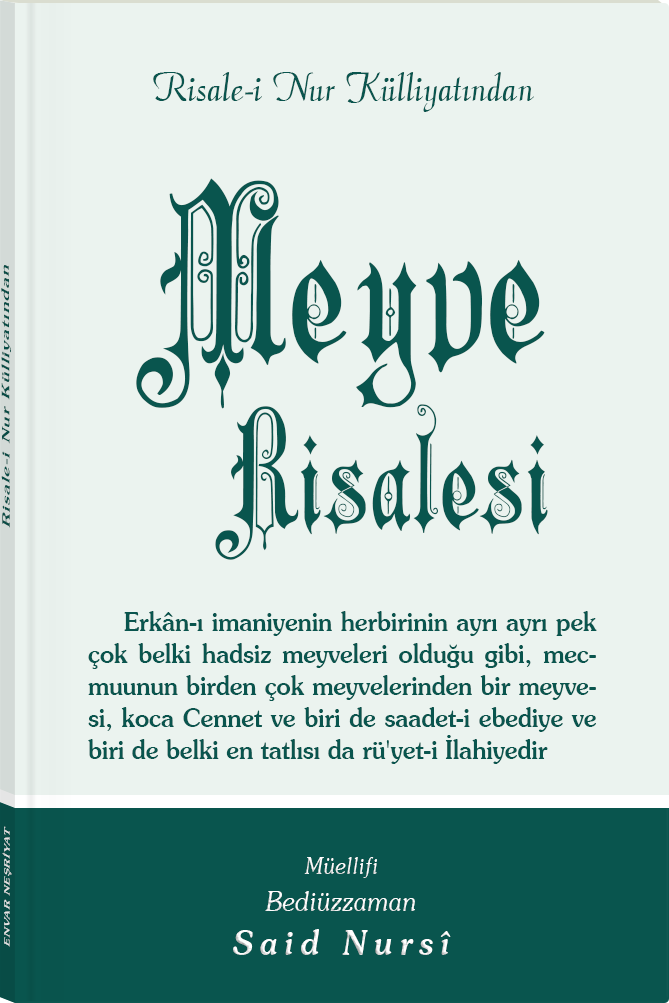
<style>
.page{position:relative;width:669px;height:1003px;background:#ebf3ef}
.page>*{position:absolute;margin:0}
.t1{font:45.3px "Barla © 072 Aria ScriptScriptSSi";color:#09554e;scale:0.94 1}
.t2{font:157.8px/168.4px "Barla © 001 Liva Nur";letter-spacing:-0.001em;color:#09554e;scale:0.93 1}
.t3{font:235px/209.6px "Barla © 001 Liva Nur";letter-spacing:-0.001em;color:#09554e;scale:0.93 1}
.t4{font:11.4px "Souvenir-Medium";letter-spacing:0.08em;color:#09554e;scale:1.65 1}
.t5{font:25.8px/32px "Souvenir-Medium";color:#09554e;scale:0.93 1}
.t6{font:8.3px "Souvenir-Medium";letter-spacing:0.08em;color:#e5e5e5;scale:1.43 1}
.t7{font:27.1px/37.8px "Souvenir-LightItalic";color:#ffffff;scale:0.92 1}
.t8{font:22.8px/39.8px "Souvenir-LightItalic";color:#ffffff;scale:0.92 1}
.t9{font:33.9px/43.8px "Souvenir-MediumItalic";letter-spacing:0.2em;color:#ffffff;scale:0.92 1}
</style>
<div class="page">
<p class="t1" style="left:153px;top:72px;width:381px;height:40px">Risale-i Nur Külliyatından</p>
<p class="t2" style="left:136px;top:178px;width:412px;height:382px;text-align:center"><span class="t3">Meyve<br></span>   Risalesi</p>
<p class="t4" style="left:1px;top:265px;width:10px;height:263px;rotate:-90deg">Risale-i Nur Külliyatından</p>
<p class="t5" style="left:88px;top:611px;width:509px;height:153px;text-align:justify">Erkân-ı imaniyenin herbirinin ayrı ayrı pek çok belki hadsiz meyveleri olduğu gibi, mecmuunun birden çok meyvelerinden bir meyvesi, koca Cennet ve biri de saadet-i ebediye ve biri de belki en tatlısı da rü'yet-i İlahiyedir</p>
<p class="t6" style="left:2px;top:826px;width:10px;height:121px;rotate:-90deg">ENVAR NEŞRİYAT</p>
<p class="t7" style="left:233px;top:857px;width:218px;height:98px;text-align:center"><span class="t8">Müellifi<br></span>Bediüzzaman<br><span class="t9">Said Nursî</span></p>
</div>
